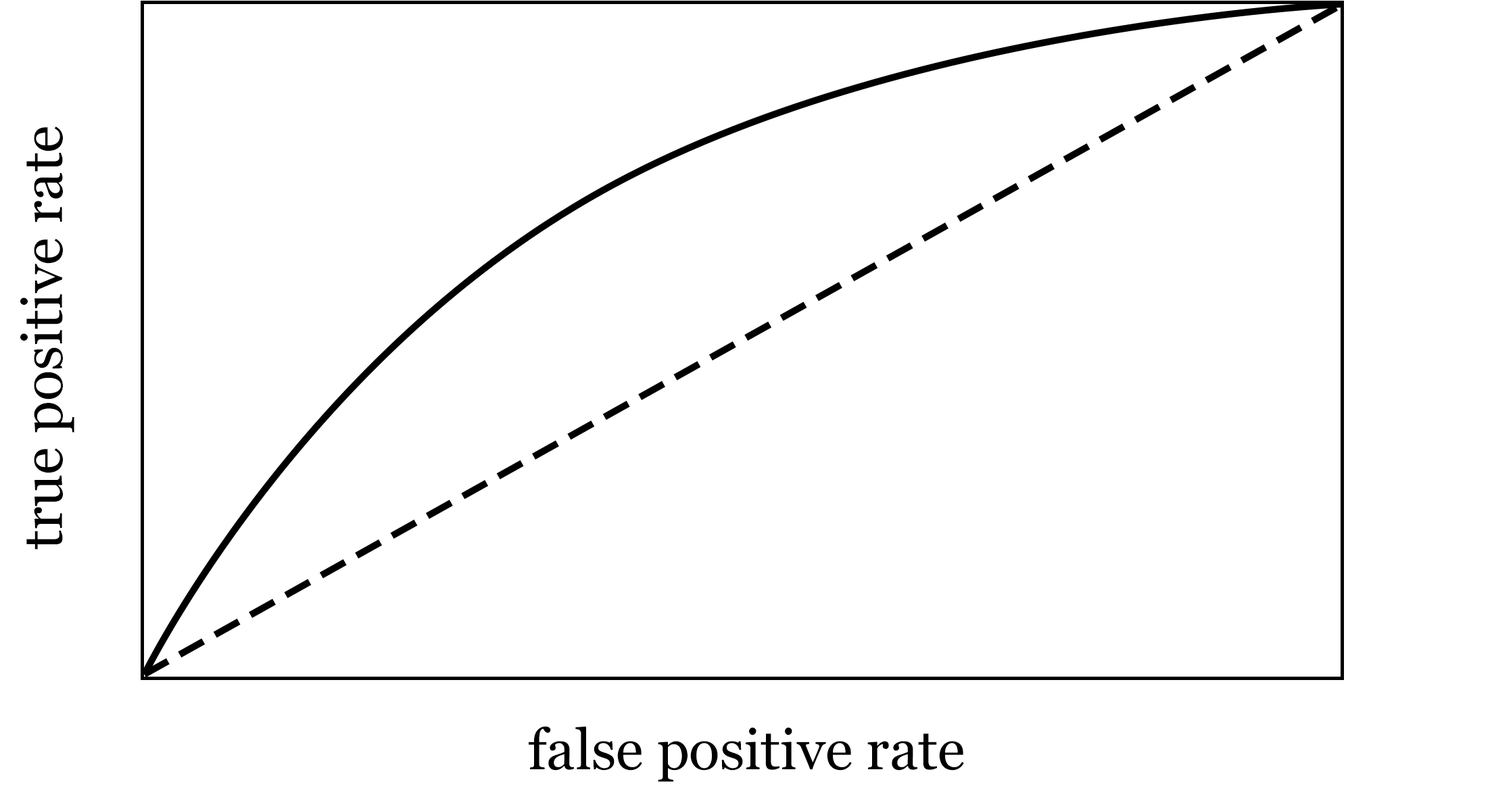
<style>
.page{position:relative;width:1492px;height:799px;background:#ffffff}
.page>*{position:absolute;margin:0}
.t1{font:56.5px "Georgia";color:#000000}
.t2{font:56.7px "Georgia";color:#000000}
</style>
<div class="page">
<p class="t1" style="left:20px;top:126px;width:54px;height:424px;rotate:-90deg">true positive rate</p>
<p class="t2" style="left:529px;top:726px;width:435px;height:56px">false positive rate</p>
</div>
